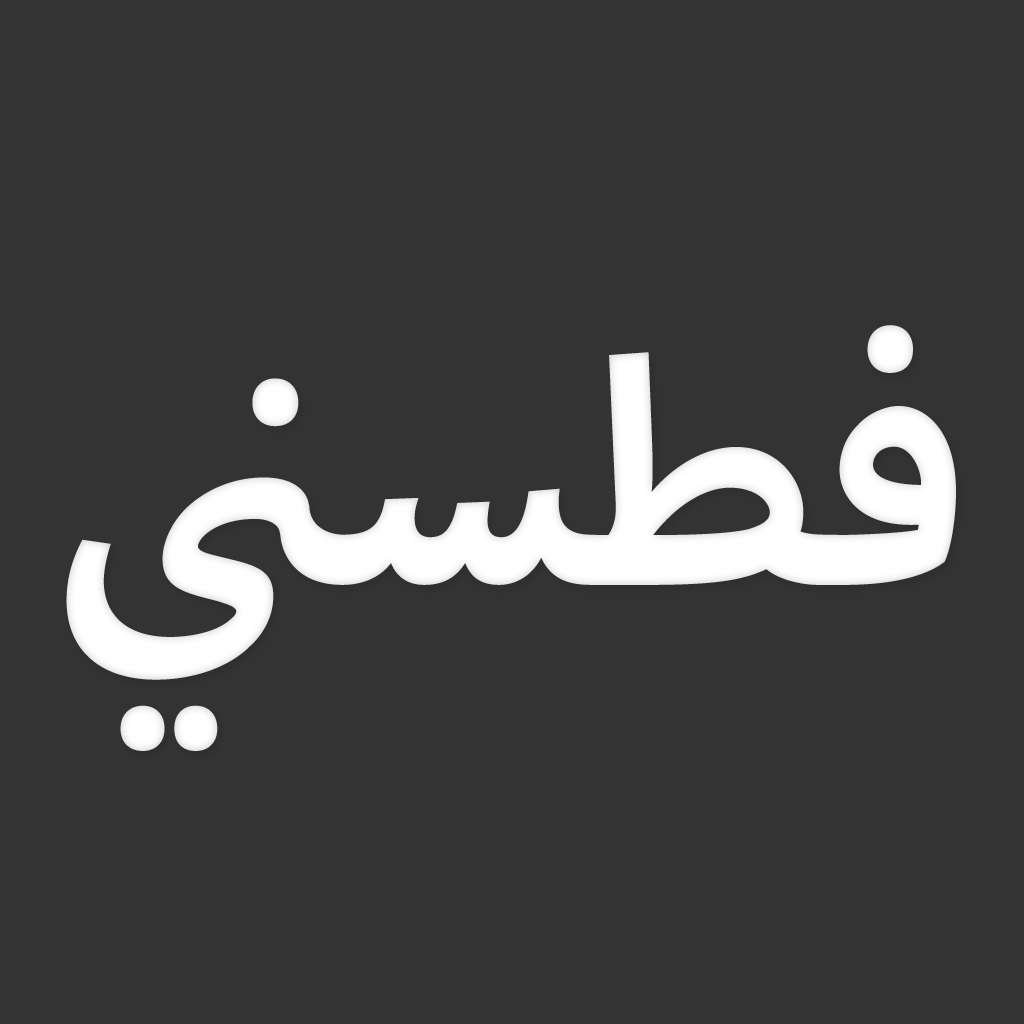
<style>
.page{position:relative;width:1024px;height:1024px;background:#333333}
.page>*{position:absolute;margin:0}
.t1{font:443.8px "MyriadArabic-Bold";letter-spacing:-0.025em;color:#ffffff}
</style>
<div class="page">
<p class="t1" style="left:66px;top:325px;width:890px;height:426px">فطسني</p>
</div>
